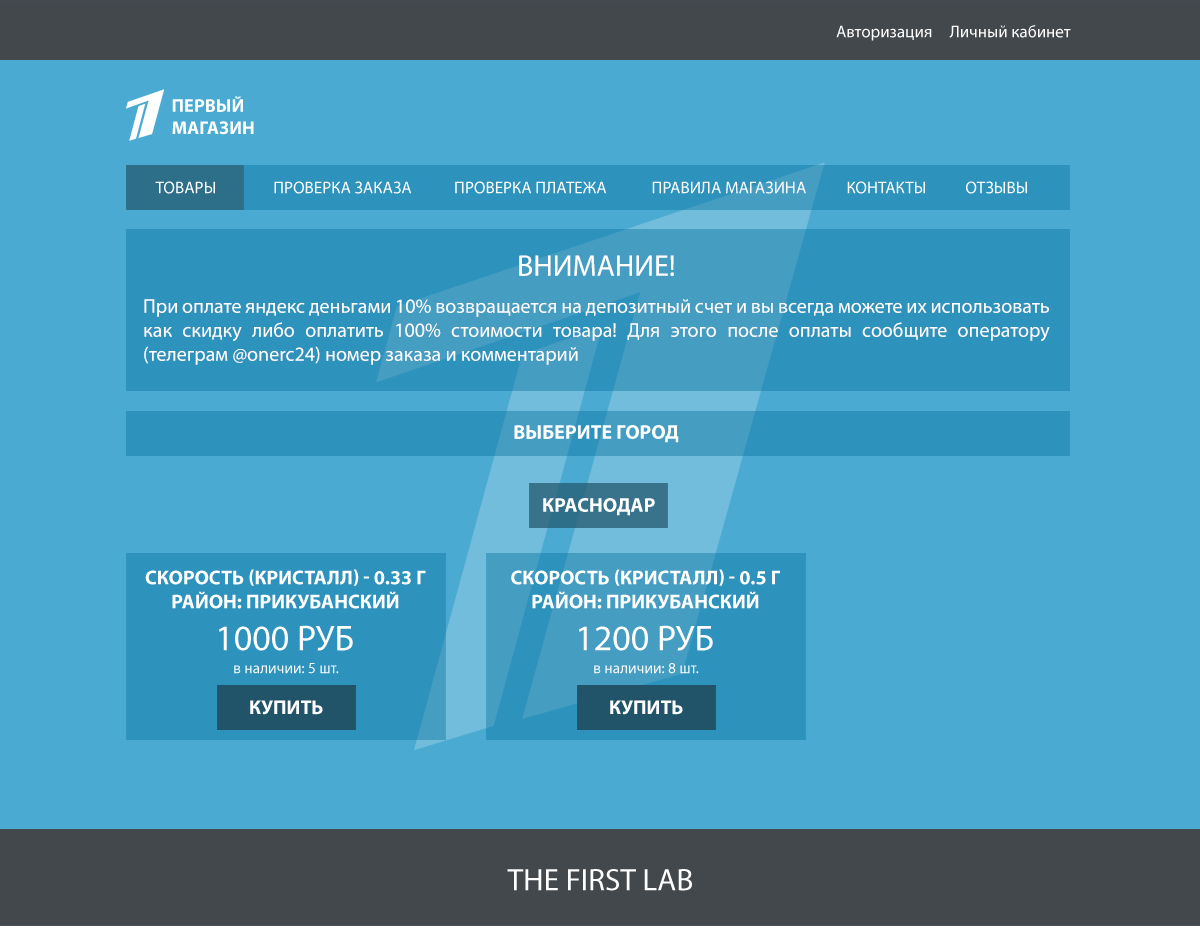
<style>
.page{position:relative;width:1200px;height:928px;background:#4aaad2}
.page>*{position:absolute;margin:0}
.t1{font:17px "MyriadPro-Regular";color:#ffffff}
.t2{font:18.5px "MyriadPro-Bold";color:#ffffff;text-transform:uppercase}
.t3{font:20px "MyriadPro-Regular";color:#ffffff}
.t4{font:30px "MyriadPro-Regular";color:#ffffff}
.t5{font:20px "MyriadPro-Bold";color:#ffffff;text-transform:uppercase}
.t6{font:36px "MyriadPro-Regular";color:#ffffff;text-transform:uppercase}
.t7{font:15.4px "MyriadPro-Regular";color:#ffffff}
.t8{font:31.2px "MyriadPro-Regular";color:#ffffff}
</style>
<div class="page">
<p class="t1" style="left:836px;top:25px;width:96px;height:16px">Авторизация</p>
<p class="t1" style="left:949px;top:25px;width:122px;height:13px">Личный кабинет</p>
<p class="t2" style="left:172px;top:96px;width:82px;height:39px">Первый <br>магазин</p>
<p class="t1" style="left:155px;top:181px;width:60px;height:13px">ТОВАРЫ</p>
<p class="t1" style="left:274px;top:181px;width:138px;height:13px">ПРОВЕРКА ЗАКАЗА</p>
<p class="t1" style="left:455px;top:181px;width:152px;height:13px">ПРОВЕРКА ПЛАТЕЖА</p>
<p class="t1" style="left:652px;top:181px;width:154px;height:13px">ПРАВИЛА МАГАЗИНА</p>
<p class="t1" style="left:847px;top:181px;width:78px;height:13px">КОНТАКТЫ</p>
<p class="t1" style="left:966px;top:181px;width:61px;height:13px">ОТЗЫВЫ</p>
<p class="t3" style="left:144px;top:255px;width:906px;height:110px;text-align:center"><span class="t4">ВНИМАНИЕ!<br><br></span>При оплате яндекс деньгами 10% возвращается на депозитный счет и вы всегда можете их использовать как скидку либо оплатить 100% стоимости товара! Для этого после оплаты сообщите оператору (телеграм @onerc24) номер заказа и комментарий</p>
<p class="t5" style="left:514px;top:425px;width:165px;height:18px">Выберите город</p>
<p class="t5" style="left:543px;top:498px;width:112px;height:18px">КРАСНОДАР</p>
<p class="t5" style="left:145px;top:569px;width:281px;height:40px;text-align:center">СКОРОСТЬ (КРИСТАЛЛ) - 0.33 Г<br>РАЙОН: ПРИКУБАНСКИЙ</p>
<p class="t5" style="left:511px;top:569px;width:269px;height:40px;text-align:center">СКОРОСТЬ (КРИСТАЛЛ) - 0.5 Г<br>РАЙОН: ПРИКУБАНСКИЙ</p>
<p class="t6" style="left:219px;top:625px;width:134px;height:26px">1000 Руб</p>
<p class="t6" style="left:579px;top:625px;width:134px;height:26px">1200 Руб</p>
<p class="t7" style="left:234px;top:663px;width:105px;height:11px">в наличии: 5 шт.</p>
<p class="t7" style="left:594px;top:663px;width:105px;height:11px">в наличии: 8 шт.</p>
<p class="t5" style="left:250px;top:700px;width:73px;height:15px">КУПИТЬ</p>
<p class="t5" style="left:610px;top:700px;width:73px;height:15px">КУПИТЬ</p>
<p class="t8" style="left:507px;top:869px;width:185px;height:22px">THE FIRST LAB</p>
</div>
